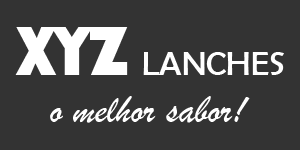
<style>
.page{position:relative;width:300px;height:150px;background:#333333}
.page>*{position:absolute;margin:0}
.t1{font:34px "BerlinSansFB-Reg";color:#ffffff}
.t2{font:72px "Bauhaus93";color:#ffffff}
.t3{font:40px "BrushScriptMT";color:#ffffff}
</style>
<div class="page">
<p class="t1" style="left:15px;top:27px;width:269px;height:48px"><span class="t2">XYZ </span>LANCHES</p>
<p class="t3" style="left:50px;top:96px;width:200px;height:27px">o melhor sabor!</p>
</div>
